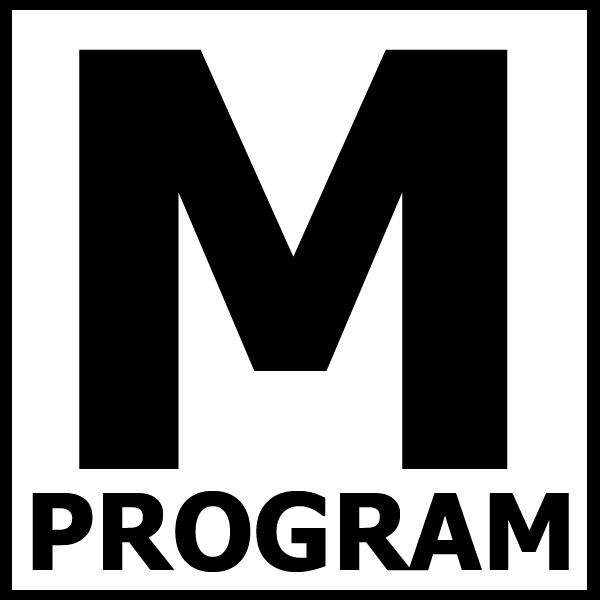
<style>
.page{position:relative;width:600px;height:600px;background:#ffffff}
.page>*{position:absolute;margin:0}
.t1{font:576.2px "Tahoma-Bold";color:#000000}
.t2{font:106px "Tahoma-Bold";color:#000000}
</style>
<div class="page">
<p class="t1" style="left:79px;top:49px;width:429px;height:420px">M</p>
<p class="t2" style="left:32px;top:491px;width:537px;height:81px">PROGRAM</p>
</div>
